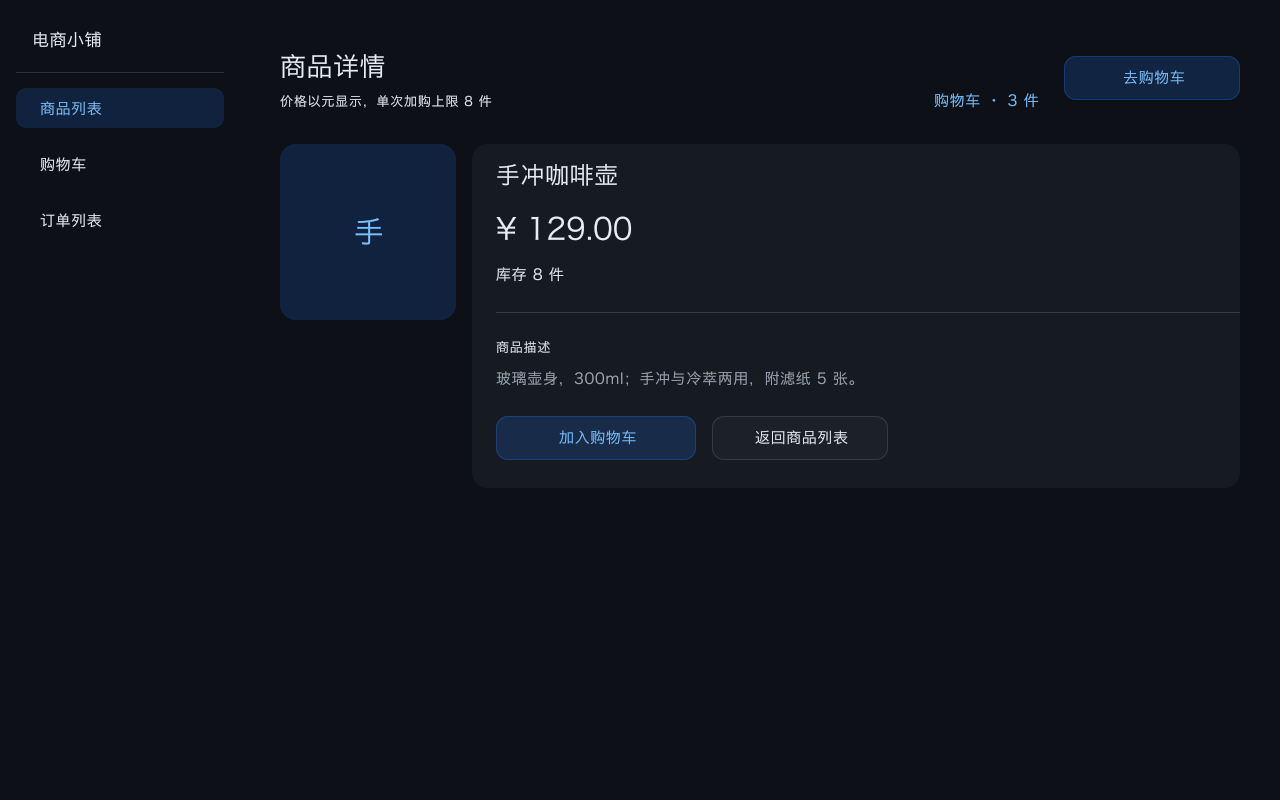
<style>
.page{position:relative;width:1280px;height:800px;background:#0d1117}
.page>*{position:absolute;margin:0}
.t1{font:17px "HiraginoSansGB-Regular";letter-spacing:0.03em;color:#e6edf3}
.t2{font:26px "HiraginoSansGB-Regular";letter-spacing:0.02em;color:#e6edf3}
.t3{font:15px "HiraginoSansGB-Regular";letter-spacing:0.04em;color:#79c0ff}
.t4{font:13px "HiraginoSansGB-Regular";letter-spacing:0.06em;color:#e6edf3}
.t5{font:15px "HiraginoSansGB-Regular";letter-spacing:0.04em;color:#e6edf3}
.t6{font:24px "HiraginoSansGB-Regular";letter-spacing:0.022em;color:#e6edf3}
.t7{font:30px "HiraginoSansGB-Regular";color:#79c0ff}
.t8{font:30px "HiraginoSansGB-Regular";color:#e6edf3}
.t9{font:15px "HiraginoSansGB-Regular";letter-spacing:0.04em;color:#9ba7b4}
</style>
<div class="page">
<p class="t1" style="left:33px;top:31px;width:69px;height:18px">电商小铺</p>
<p class="t2" style="left:280px;top:54px;width:106px;height:25px">商品详情</p>
<p class="t3" style="left:1122px;top:70px;width:63px;height:16px">去购物车</p>
<p class="t3" style="left:39px;top:101px;width:64px;height:16px">商品列表</p>
<p class="t4" style="left:279px;top:95px;width:214px;height:14px">价格以元显示，单次加购上限 8 件</p>
<p class="t3" style="left:933px;top:93px;width:107px;height:16px">购物车 · 3 件</p>
<p class="t5" style="left:39px;top:157px;width:48px;height:16px">购物车</p>
<p class="t6" style="left:496px;top:163px;width:122px;height:24px">手冲咖啡壶</p>
<p class="t5" style="left:39px;top:213px;width:64px;height:16px">订单列表</p>
<p class="t7" style="left:354px;top:218px;width:29px;height:28px">手</p>
<p class="t8" style="left:495px;top:216px;width:138px;height:26px">¥ 129.00</p>
<p class="t5" style="left:495px;top:267px;width:70px;height:16px">库存 8 件</p>
<p class="t4" style="left:495px;top:341px;width:56px;height:13px">商品描述</p>
<p class="t9" style="left:495px;top:371px;width:361px;height:16px">玻璃壶身，300ml；手冲与冷萃两用，附滤纸 5 张。</p>
<p class="t3" style="left:558px;top:430px;width:79px;height:16px">加入购物车</p>
<p class="t5" style="left:754px;top:430px;width:95px;height:16px">返回商品列表</p>
</div>
